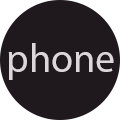
<style>
.page{position:relative;width:120px;height:120px;background:#1f191e}
.page>*{position:absolute;margin:0}
.t1{font:39.6px "MyriadPro-Regular";color:#ddd7dc}
</style>
<div class="page">
<p class="t1" style="left:8px;top:43px;width:106px;height:37px">phone</p>
</div>
